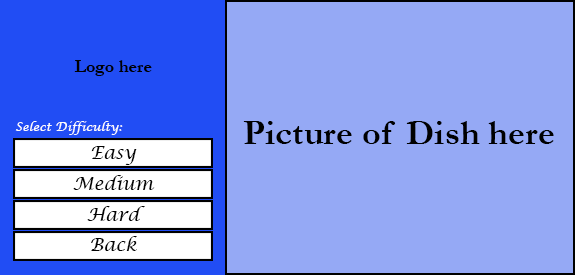
<style>
.page{position:relative;width:575px;height:275px;background:#95a9f5}
.page>*{position:absolute;margin:0}
.t1{font:18px "Garamond-Bold";color:#000000}
.t2{font:12px "LucidaCalligraphy-Italic";color:#fdfdfd}
.t3{font:36px "Garamond-Bold";color:#000000}
.t4{font:18px "LucidaCalligraphy-Italic";color:#040404}
</style>
<div class="page">
<p class="t1" style="left:74px;top:60px;width:78px;height:16px">Logo here</p>
<p class="t2" style="left:15px;top:121px;width:108px;height:14px">Select Difficulty:</p>
<p class="t3" style="left:243px;top:121px;width:311px;height:23px">Picture of Dish here</p>
<p class="t4" style="left:91px;top:146px;width:46px;height:19px">Easy</p>
<p class="t4" style="left:73px;top:175px;width:82px;height:15px">Medium</p>
<p class="t4" style="left:87px;top:206px;width:58px;height:15px">Hard</p>
<p class="t4" style="left:91px;top:236px;width:46px;height:15px">Back</p>
</div>
